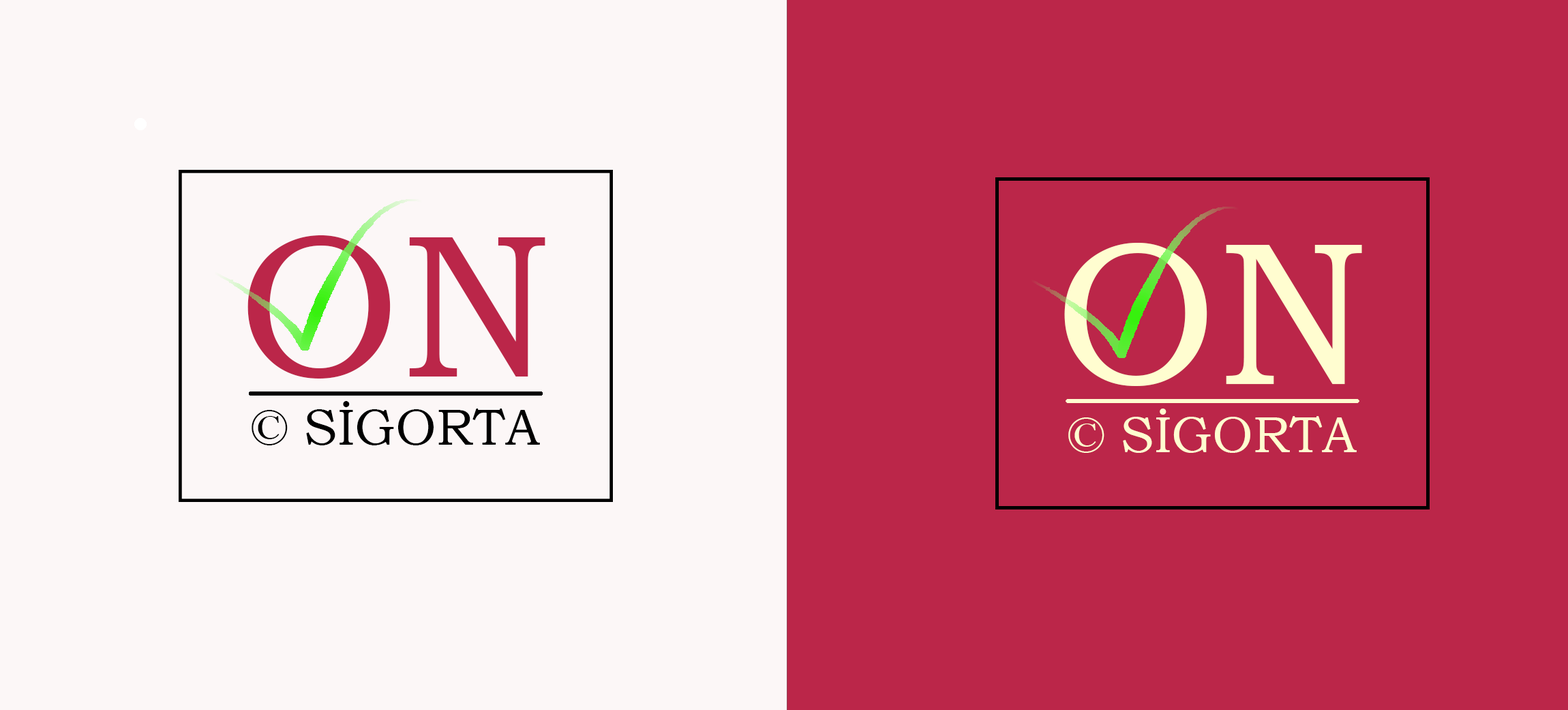
<style>
.page{position:relative;width:1568px;height:710px;background:#bb2649}
.page>*{position:absolute;margin:0}
.t1{font:51.1px/22.7px "BookmanOldStyle";color:#000000}
.t2{font:204.5px/22.7px "BookmanOldStyle";color:#bb2649}
.t3{font:51.1px/22.7px "BookmanOldStyle";color:#fffdd0}
.t4{font:204.5px/22.7px "BookmanOldStyle";color:#fffdd0}
</style>
<div class="page">
<p class="t1" style="left:247px;top:235px;width:298px;height:210px;text-align:center"><span class="t2">ON<br><br><br></span>© SİGORTA</p>
<p class="t3" style="left:1064px;top:243px;width:298px;height:210px;text-align:center"><span class="t4">ON<br><br></span><br>© SİGORTA</p>
</div>
